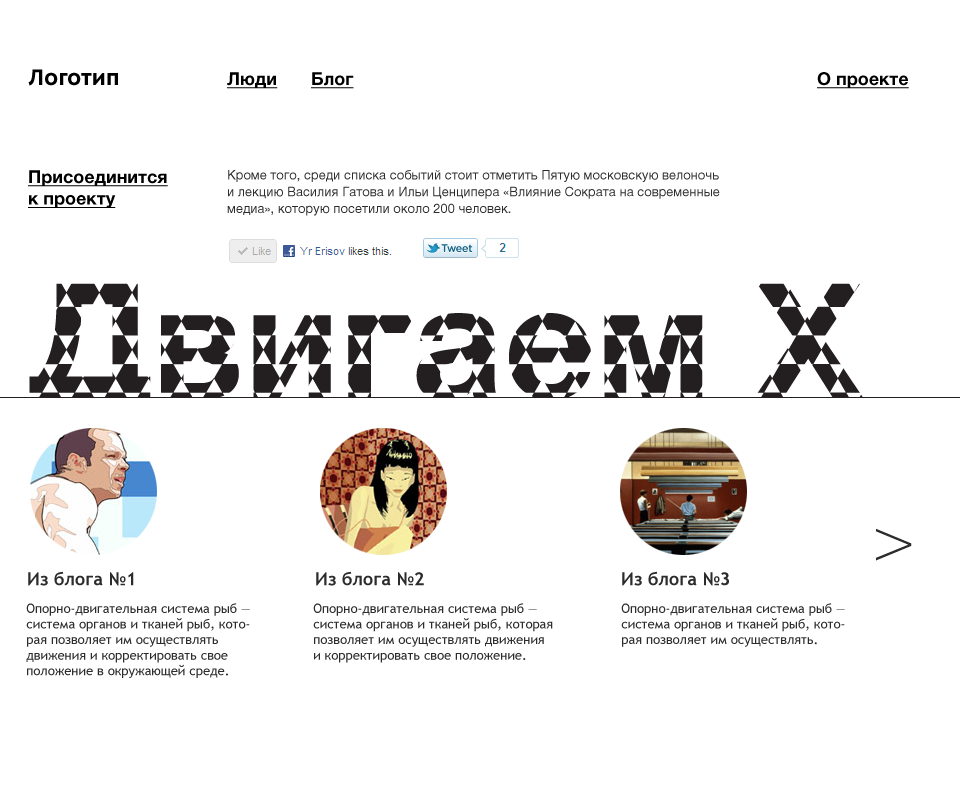
<style>
.page{position:relative;width:960px;height:789px;background:#ffffff}
.page>*{position:absolute;margin:0}
.t1{font:24px "OksanaSansNarrow-Bold";color:#000000}
.t2{font:18px "HelveticaNeueLTCYR-Bold";color:#000000;text-decoration:underline}
.t3{font:13px/16.8px "HelveticaNeueLTCYR-Roman";color:#2c2c2c}
.t4{font:72px "HelveticaNeueLTCYR-Thin";color:#2c2c2c}
.t5{font:18px "TrebuchetMS-Bold";color:#2c2c2c}
.t6{font:13px "TrebuchetMS";color:#2c2c2c}
</style>
<div class="page">
<p class="t1" style="left:28px;top:69px;width:90px;height:17px">Логотип</p>
<p class="t2" style="left:227px;top:72px;width:51px;height:17px">Люди</p>
<p class="t2" style="left:311px;top:72px;width:43px;height:17px">Блог</p>
<p class="t2" style="left:817px;top:72px;width:92px;height:17px">О проекте</p>
<p class="t2" style="left:28px;top:170px;width:140px;height:38px">Присоединится<br>к проекту</p>
<p class="t3" style="left:227px;top:170px;width:493px;height:46px">Кроме того, среди списка событий стоит отметить Пятую московскую велоночь и лекцию Василия Гатова и Ильи Ценципера «Влияние Сократа на современные медиа», которую посетили около 200 человек.</p>
<p class="t4" style="left:876px;top:528px;width:36px;height:33px">&gt;</p>
<p class="t5" style="left:28px;top:571px;width:106px;height:15px">Из блога №1</p>
<p class="t5" style="left:316px;top:571px;width:108px;height:15px">Из блога №2</p>
<p class="t5" style="left:622px;top:571px;width:107px;height:15px">Из блога №3</p>
<p class="t6" style="left:26px;top:603px;width:224px;height:75px">Опорно-двигательная система рыб — система органов и тканей рыб, которая позволяет им осуществлять движения и корректировать свое положение в окружающей среде.</p>
<p class="t6" style="left:313px;top:603px;width:240px;height:60px">Опорно-двигательная система рыб — система органов и тканей рыб, которая позволяет им осуществлять движения и корректировать свое положение.</p>
<p class="t6" style="left:621px;top:603px;width:224px;height:44px">Опорно-двигательная система рыб — система органов и тканей рыб, которая позволяет им осуществлять.</p>
</div>
